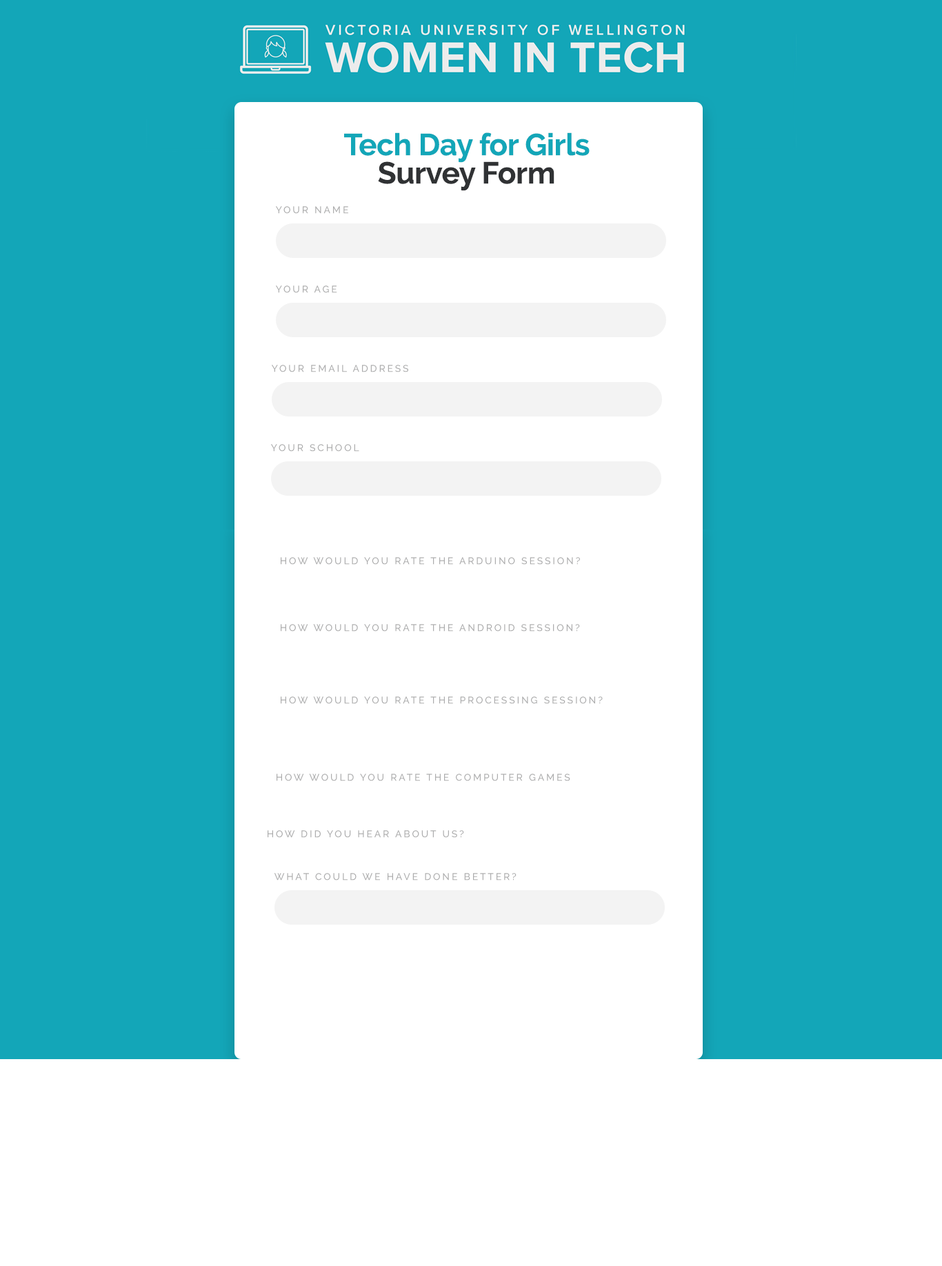
<style>
.page{position:relative;width:942px;height:1266px;background:#ffffff}
.page>*{position:absolute;margin:0}
.t1{font:30.3px "Raleway-Bold";letter-spacing:-0.01em;color:#13a6b8}
.t2{font:30.3px "Raleway-Bold";letter-spacing:-0.01em;color:#303234}
.t3{font:9.7px "Raleway-Medium";letter-spacing:0.2em;color:#acacad;text-transform:uppercase}
.t4{font:9.7px/46.9px "Raleway-Medium";letter-spacing:0.2em;color:#acacad;text-transform:uppercase}
</style>
<div class="page">
<p class="t1" style="left:344px;top:132px;width:246px;height:31px">Tech Day for Girls</p>
<p class="t2" style="left:378px;top:161px;width:176px;height:30px">Survey Form</p>
<p class="t3" style="left:276px;top:206px;width:72px;height:8px">Your name</p>
<p class="t4" style="left:276px;top:285px;width:61px;height:8px">Your age<br>v</p>
<p class="t3" style="left:272px;top:365px;width:136px;height:7px">Your email address</p>
<p class="t3" style="left:271px;top:444px;width:88px;height:8px">Your school</p>
<p class="t3" style="left:281px;top:557px;width:299px;height:8px">how would you rate the arduino session?</p>
<p class="t3" style="left:281px;top:624px;width:299px;height:8px">how would you rate the android session?</p>
<p class="t3" style="left:281px;top:696px;width:322px;height:8px">how would you rate the processing session?</p>
<p class="t3" style="left:277px;top:774px;width:293px;height:7px">how would you rate the computer games session?</p>
<p class="t3" style="left:268px;top:830px;width:196px;height:8px">how did you hear about us?</p>
<p class="t3" style="left:274px;top:873px;width:242px;height:8px">what could we have done better?</p>
</div>
